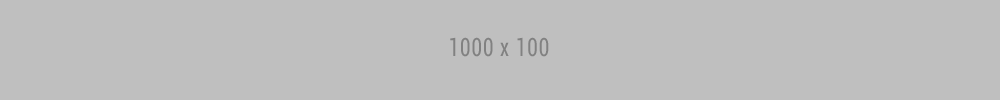
<style>
.page{position:relative;width:1000px;height:100px;background:#bfbfbf}
.page>*{position:absolute;margin:0}
.t1{font:25px "Roboto-Condensed";letter-spacing:0.07em;color:#818181;scale:0.8 1}
</style>
<div class="page">
<p class="t1" style="left:450px;top:37px;width:99px;height:20px">1000 x 100</p>
</div>
